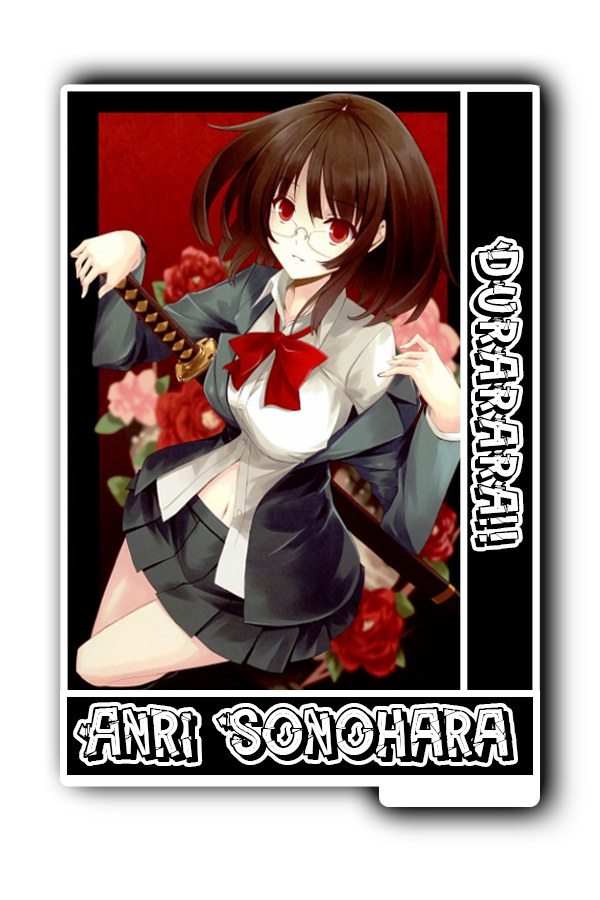
<style>
.page{position:relative;width:600px;height:900px;background:#ffffff}
.page>*{position:absolute;margin:0}
.t1{font:61px "PeintureFraiche";color:#000000}
.t2{font:75px "PeintureFraiche";color:#000000}
</style>
<div class="page">
<p class="t1" style="left:473px;top:239px;width:47px;height:309px;rotate:90deg">DURARARA!!</p>
<p class="t2" style="left:77px;top:706px;width:437px;height:57px">Anri Sonohara</p>
</div>
